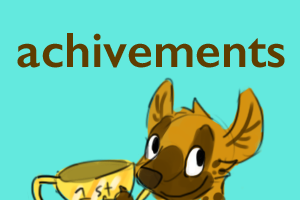
<style>
.page{position:relative;width:300px;height:200px;background:#63e9de}
.page>*{position:absolute;margin:0}
.t1{font:50px "GillSans-SemiBold";color:#5f3d01}
</style>
<div class="page">
<p class="t1" style="left:17px;top:33px;width:268px;height:35px">achivements</p>
</div>
